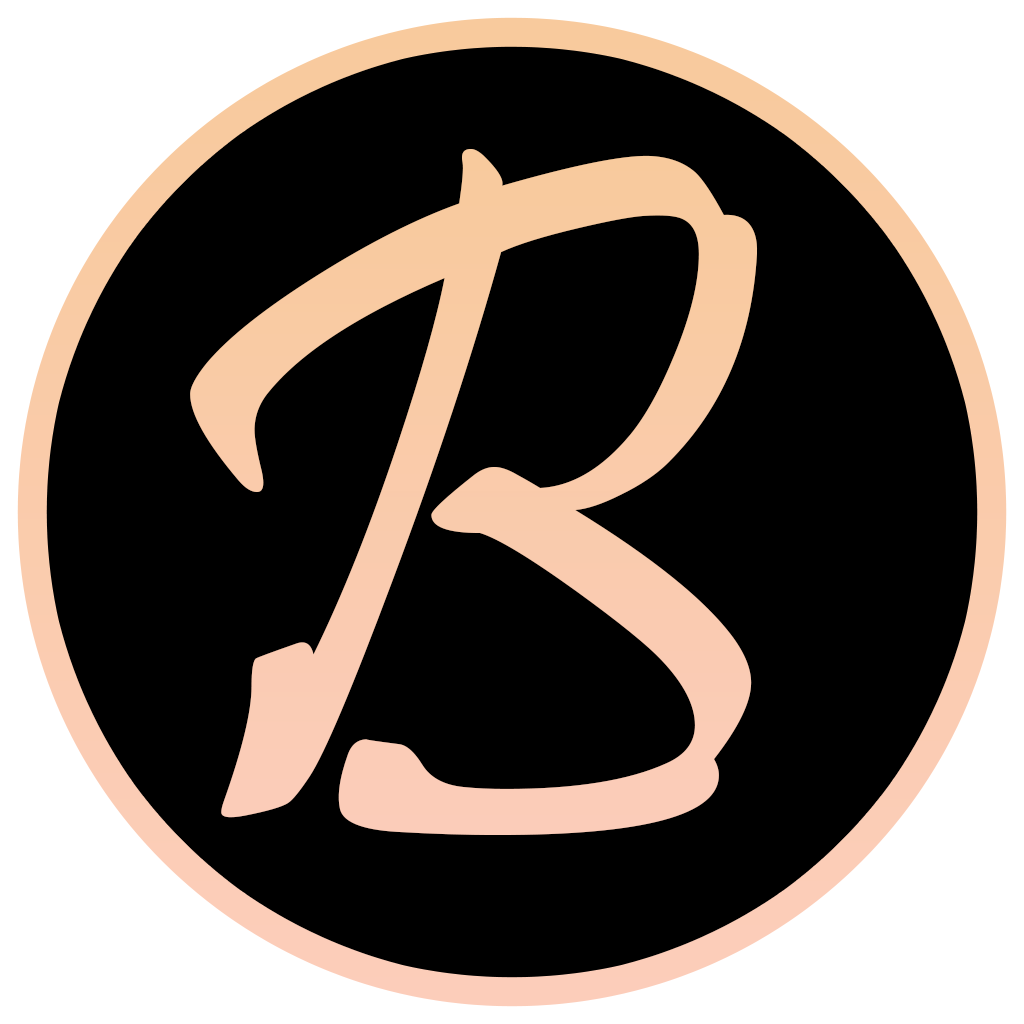
<style>
.page{position:relative;width:1024px;height:1024px;background:#000000}
.page>*{position:absolute;margin:0}
.t1{font:998.3px "Pristina-Regular";color:#f9cbab}
</style>
<div class="page">
<p class="t1" style="left:190px;top:149px;width:568px;height:686px">B</p>
</div>
